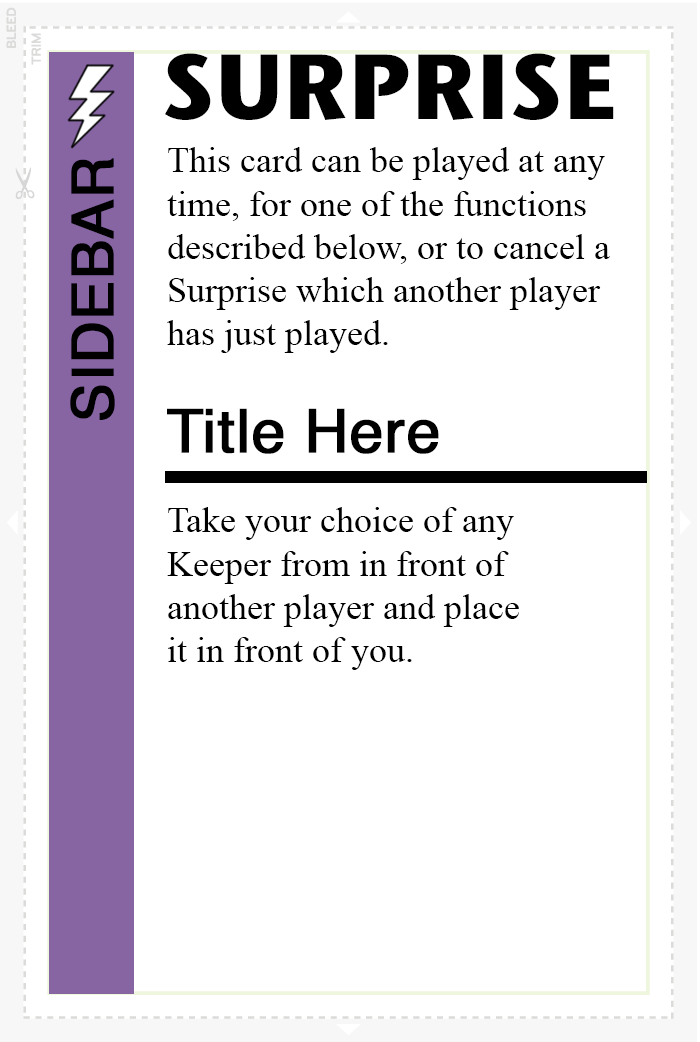
<style>
.page{position:relative;width:700px;height:1042px;background:#ffffff}
.page>*{position:absolute;margin:0}
.t1{font:92px "StoneSansITC-Bold";color:#000000}
.t2{font:36px "TimesNewRomanPSMT";color:#000000}
.t3{font:58px "Helvetica";color:#000000;font-weight:bold}
.t4{font:60px "Helvetica";color:#000000;font-weight:bold}
</style>
<div class="page">
<p class="t1" style="left:165px;top:53px;width:449px;height:67px">SURPRISE</p>
<p class="t2" style="left:167px;top:147px;width:443px;height:206px">This card can be played at any <br>time, for one of the functions<br>described below, or to cancel a<br>Surprise which another player<br>has just played.</p>
<p class="t3" style="left:70px;top:158px;width:45px;height:262px;rotate:-90deg">SIDEBAR</p>
<p class="t4" style="left:167px;top:408px;width:272px;height:46px">Title Here</p>
<p class="t2" style="left:167px;top:507px;width:352px;height:163px">Take your choice of any<br>Keeper from in front of <br>another player and place<br>it in front of you.</p>
</div>
